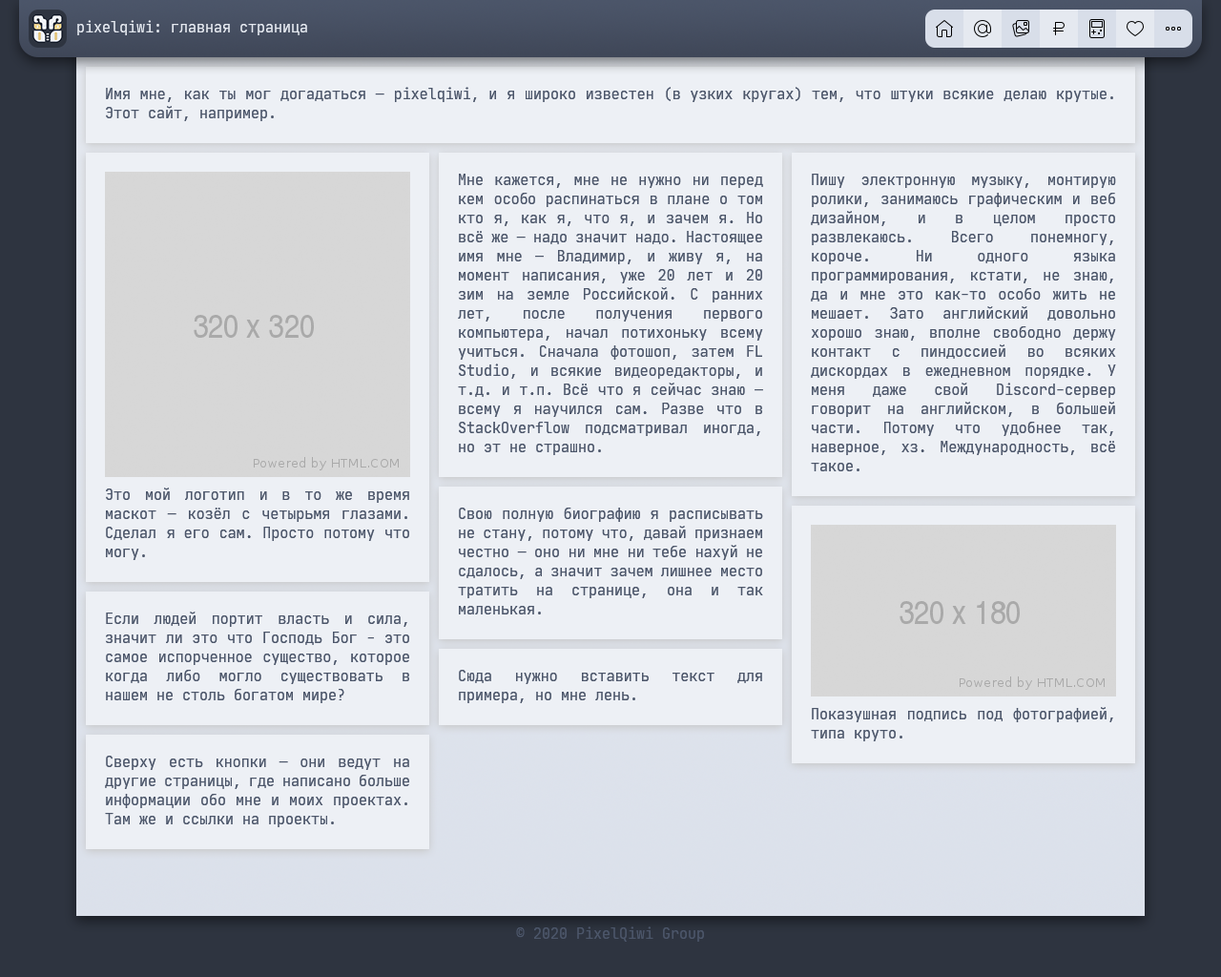
<style>
.page{position:relative;width:1221px;height:977px;background:#edf0f5}
.page>*{position:absolute;margin:0}
.t1{font:14.3px "JetBrainsMono-Regular";color:#e5e9f0}
.t2{font:14.3px/19.1px "JetBrainsMono-Regular";color:#4c566a}
.t3{font:14.3px "JetBrainsMono-Regular";color:#4c566a}
</style>
<div class="page">
<p class="t1" style="left:77px;top:20px;width:230px;height:15px">pixelqiwi: главная страница</p>
<p class="t2" style="left:106px;top:87px;width:1007px;height:34px;text-align:justify">Имя мне, как ты мог догадаться — pixelqiwi, и я широко известен (в узких кругах) тем, что штуки всякие делаю крутые. Этот сайт, например.</p>
<p class="t2" style="left:458px;top:174px;width:305px;height:281px;text-align:justify">Мне кажется, мне не нужно ни перед кем особо распинаться в плане о том кто я, как я, что я, и зачем я. Но всё же — надо значит надо. Настоящее имя мне — Владимир, и живу я, на момент написания, уже 20 лет и 20 зим на земле Российской. С ранних лет, после получения первого компьютера, начал потихоньку всему учиться. Сначала фотошоп, затем FL Studio, и всякие видеоредакторы, и т.д. и т.п. Всё что я сейчас знаю — всему я научился сам. Разве что в StackOverflow подсматривал иногда, но эт не страшно.</p>
<p class="t2" style="left:811px;top:174px;width:305px;height:297px;text-align:justify">Пишу электронную музыку, монтирую ролики, занимаюсь графическим и веб дизайном, и в целом просто развлекаюсь. Всего понемногу, короче. Ни одного языка программирования, кстати, не знаю, да и мне это как-то особо жить не мешает. Зато английский довольно хорошо знаю, вполне свободно держу контакт с пиндоссией во всяких дискордах в ежедневном порядке. У меня даже свой Discord-сервер говорит на английском, в большей части. Потому что удобнее так, наверное, хз. Международность, всё такое.</p>
<p class="t2" style="left:106px;top:487px;width:303px;height:73px;text-align:justify">Это мой логотип и в то же время маскот — козёл с четырьмя глазами. Сделал я его сам. Просто потому что могу.</p>
<p class="t2" style="left:458px;top:507px;width:305px;height:107px;text-align:justify">Свою полную биографию я расписывать не стану, потому что, давай признаем честно — оно ни мне ни тебе нахуй не сдалось, а значит зачем лишнее место тратить на странице, она и так маленькая.</p>
<p class="t2" style="left:105px;top:611px;width:304px;height:92px;text-align:justify">Если людей портит власть и сила, значит ли это что Господь Бог - это самое испорченное существо, которое когда либо могло существовать в нашем не столь богатом мире?</p>
<p class="t2" style="left:459px;top:670px;width:303px;height:33px;text-align:justify">Сюда нужно вставить текст для примера, но мне лень.</p>
<p class="t2" style="left:811px;top:707px;width:302px;height:34px;text-align:justify">Показушная подпись под фотографией, типа круто.</p>
<p class="t2" style="left:105px;top:755px;width:304px;height:72px;text-align:justify">Сверху есть кнопки — они ведут на другие страницы, где написано больше информации обо мне и моих проектах. Там же и ссылки на проекты.</p>
<p class="t3" style="left:516px;top:926px;width:188px;height:15px">© 2020 PixelQiwi Group</p>
</div>
